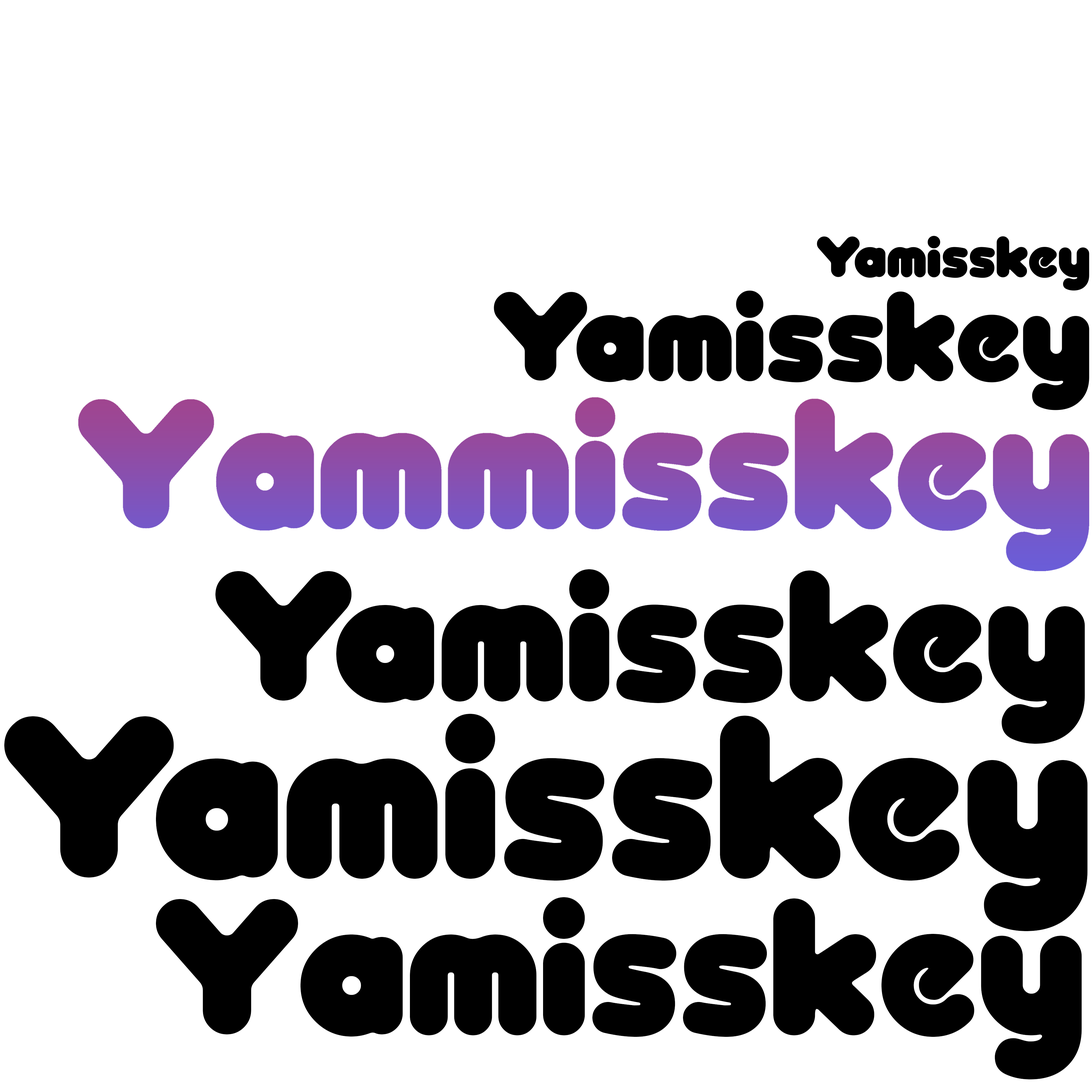
<style>
.page{position:relative;width:1092px;height:1092px;background:#ffffff}
.page>*{position:absolute;margin:0}
.t1{font:196.9px "OTADESIGNRounded";color:#000000}
.t2{font:196.9px "OTADESIGNRounded";letter-spacing:-0.09em;color:#000000}
.t3{font:245.2px "OTADESIGNRounded";color:#000000}
.t4{font:205.6px "OTADESIGNRounded";color:#000000}
</style>
<div class="page">
<p class="t1" style="left:215px;top:569px;width:870px;height:175px"><span class="t2">Y</span>amisskey</p>
<p class="t3" style="left:156px;top:714px;width:932px;height:217px">amisskey</p>
<p class="t3" style="left:4px;top:716px;width:170px;height:161px">Y</p>
<p class="t4" style="left:156px;top:897px;width:926px;height:182px">Yamisskey</p>
</div>
